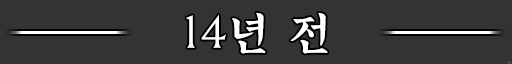
<style>
.page{position:relative;width:512px;height:64px;background:#333333}
.page>*{position:absolute;margin:0}
.t1{font:44px "KoreanNGS-M";letter-spacing:0.04em;color:#ffffff}
.t2{font:44px "KoreanGWS-M";letter-spacing:0.04em;color:#ffffff}
</style>
<div class="page">
<p class="t1" style="left:186px;top:12px;width:142px;height:42px"><span class="t2">14</span>년 전</p>
</div>
